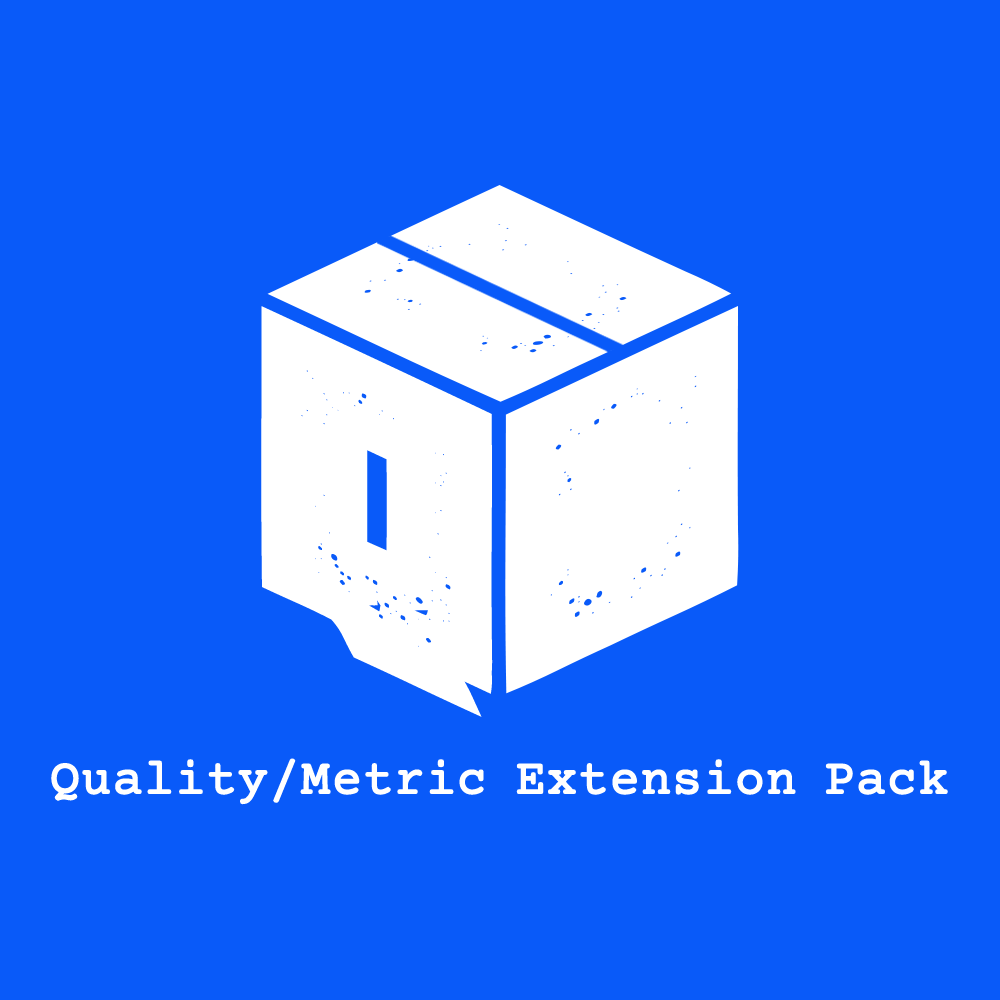
<style>
.page{position:relative;width:1000px;height:1000px;background:#095af9}
.page>*{position:absolute;margin:0}
.t1{font:402.9px "ManiacGrunged-Regular";color:#ffffff;scale:1.24 1}
.t2{font:50px "CourierPrime-Regular";color:#ffffff;font-weight:bold}
</style>
<div class="page">
<p class="t1" style="left:261px;top:306px;width:232px;height:411px;rotate:25deg">q</p>
<p class="t2" style="left:51px;top:758px;width:897px;height:47px">Quality/Metric Extension Pack</p>
</div>
